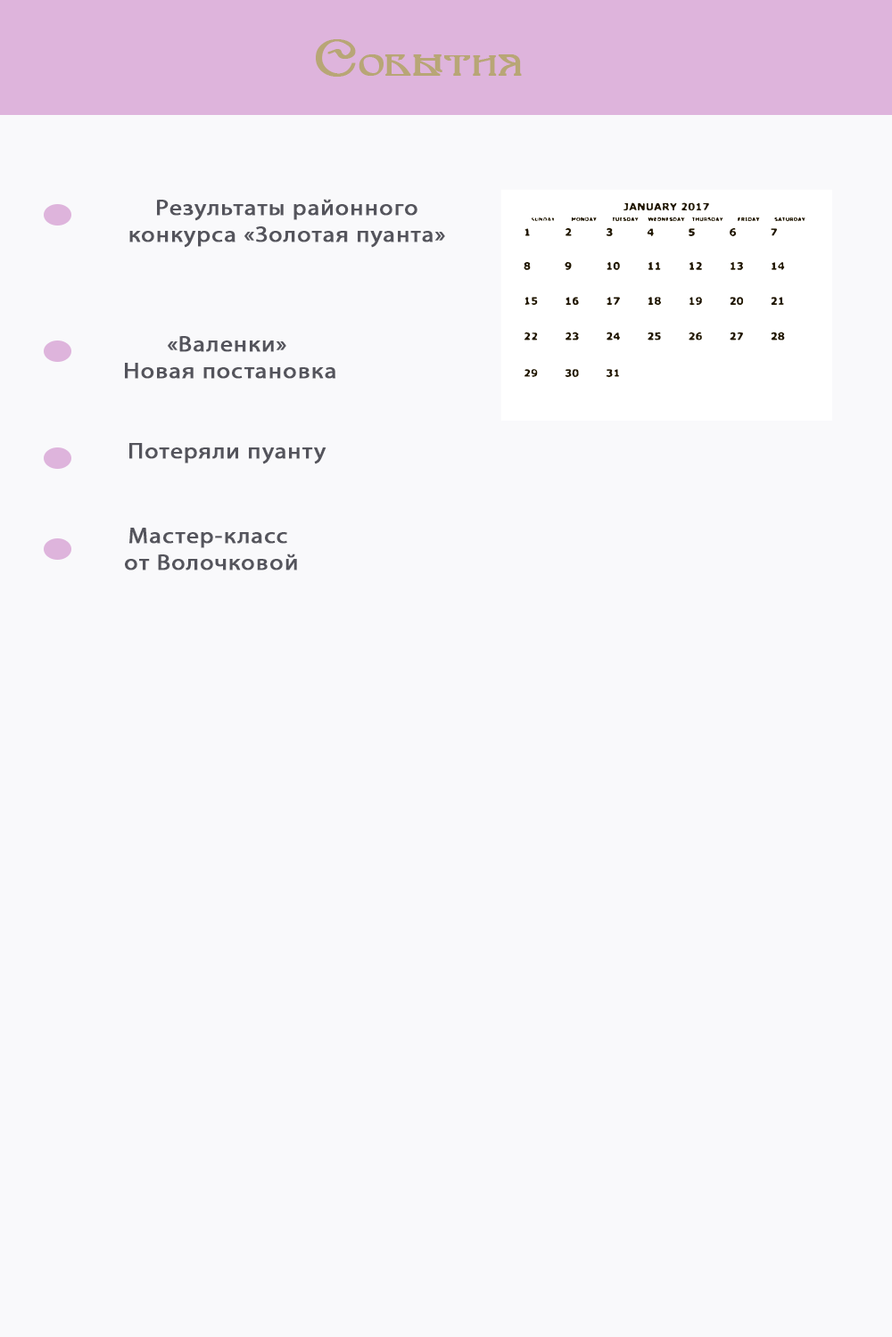
<style>
.page{position:relative;width:892px;height:1337px;background:#f9f9fb}
.page>*{position:absolute;margin:0}
.t1{font:44.6px "Vityazcyr";letter-spacing:0.025em;color:#b8a676;font-weight:bold;scale:1.1 1}
.t2{font:22.3px "MyriadPro-Regular";letter-spacing:0.025em;color:#54545c;font-weight:bold;scale:1.1 1}
</style>
<div class="page">
<p class="t1" style="left:316px;top:39px;width:206px;height:38px">События</p>
<p class="t2" style="left:129px;top:199px;width:316px;height:49px;text-align:center">Результаты районного<br>конкурса «Золотая пуанта»</p>
<p class="t2" style="left:125px;top:336px;width:210px;height:129px;text-align:center">«Валенки»<br> Новая постановка<br><br><br>Потеряли пуанту</p>
<p class="t2" style="left:125px;top:528px;width:172px;height:43px;text-align:center">Мастер-класс <br>от Волочковой</p>
</div>
